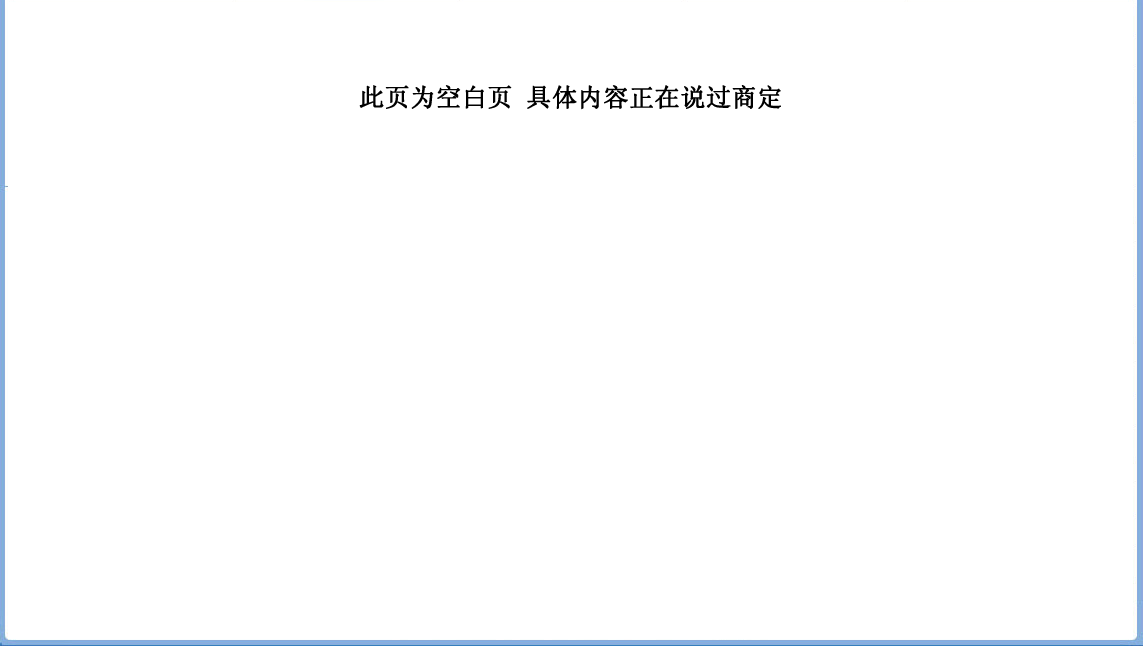
<style>
.page{position:relative;width:1143px;height:646px;background:#ffffff}
.page>*{position:absolute;margin:0}
.t1{font:25px "SimSun";color:#000000;font-weight:bold}
</style>
<div class="page">
<p class="t1" style="left:359px;top:85px;width:422px;height:25px">此页为空白页 具体内容正在说过商定</p>
</div>
